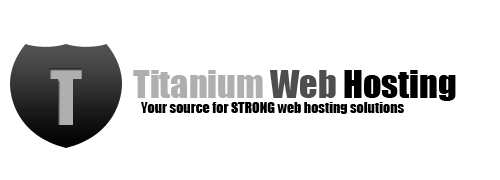
<style>
.page{position:relative;width:500px;height:180px;background:#ffffff}
.page>*{position:absolute;margin:0}
.t1{font:36px "Impact";color:#afafaf}
.t2{font:36px "Impact";color:#4e4e4e}
.t3{font:36px "Impact";color:#000000}
.t4{font:14px "Impact";color:#000000}
</style>
<div class="page">
<p class="t1" style="left:133px;top:70px;width:323px;height:31px">Titanium <span class="t2">Web</span><span class="t3"> Hosting</span></p>
<p class="t4" style="left:141px;top:102px;width:263px;height:12px">Your source for STRONG web hosting solutions</p>
</div>
